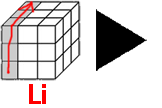
<style>
.page{position:relative;width:162px;height:108px;background:#ffffff}
.page>*{position:absolute;margin:0}
.t1{font:27px "MyriadPro-Regular";color:#ff0000;font-weight:bold}
</style>
<div class="page">
<p class="t1" style="left:29px;top:84px;width:17px;height:20px">Li</p>
</div>
